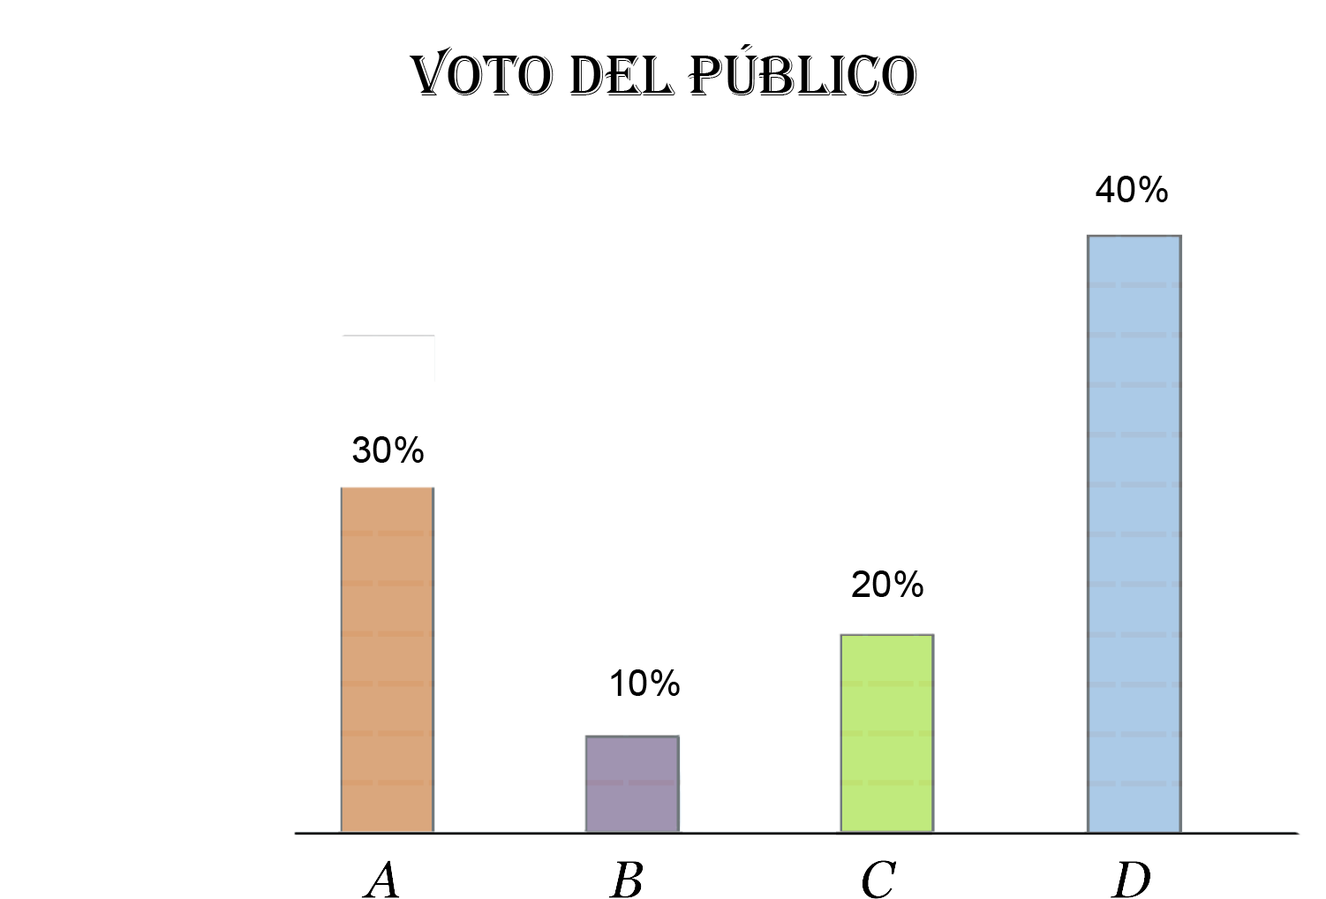
<style>
.page{position:relative;width:1326px;height:899px;background:#ffffff}
.page>*{position:absolute;margin:0}
.t1{font:58.9px "Algerian";color:#000000;text-transform:uppercase}
.t2{font:36.8px "ArialMT";color:#000000;text-transform:uppercase}
</style>
<div class="page">
<p class="t1" style="left:409px;top:44px;width:509px;height:52px">Voto del público</p>
<p class="t2" style="left:1096px;top:176px;width:72px;height:26px">40%</p>
<p class="t2" style="left:352px;top:436px;width:72px;height:27px">30%</p>
<p class="t2" style="left:852px;top:570px;width:72px;height:27px">20%</p>
<p class="t2" style="left:611px;top:669px;width:69px;height:27px">10%</p>
</div>
